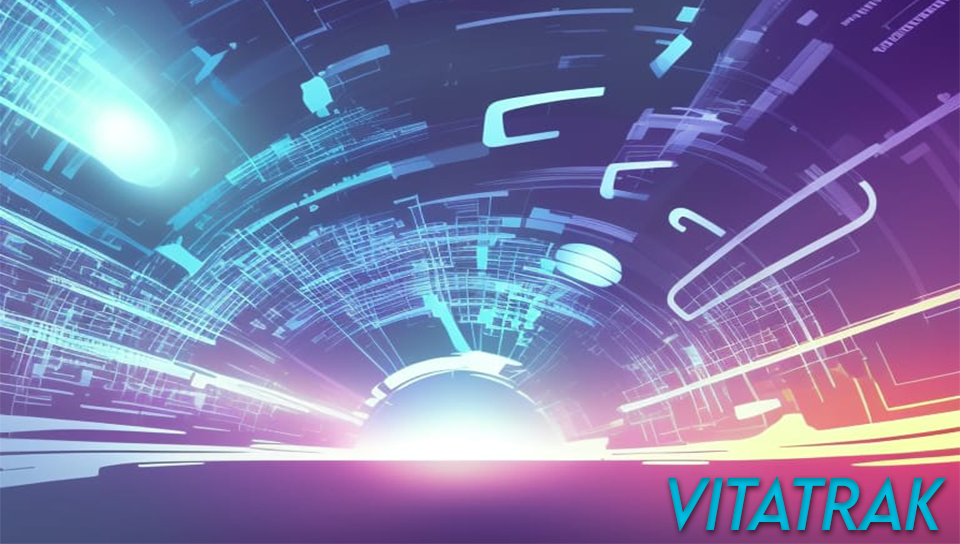
<style>
.page{position:relative;width:960px;height:544px}
.page>*{position:absolute;margin:0}
.t1{font:66.2px "LEMONMILK-RegularItalic";letter-spacing:-0.02em;color:#00b0d2;scale:0.92 1}
</style>
<div class="page">
<p class="t1" style="left:668px;top:476px;width:279px;height:55px">vitaTRAK</p>
</div>
